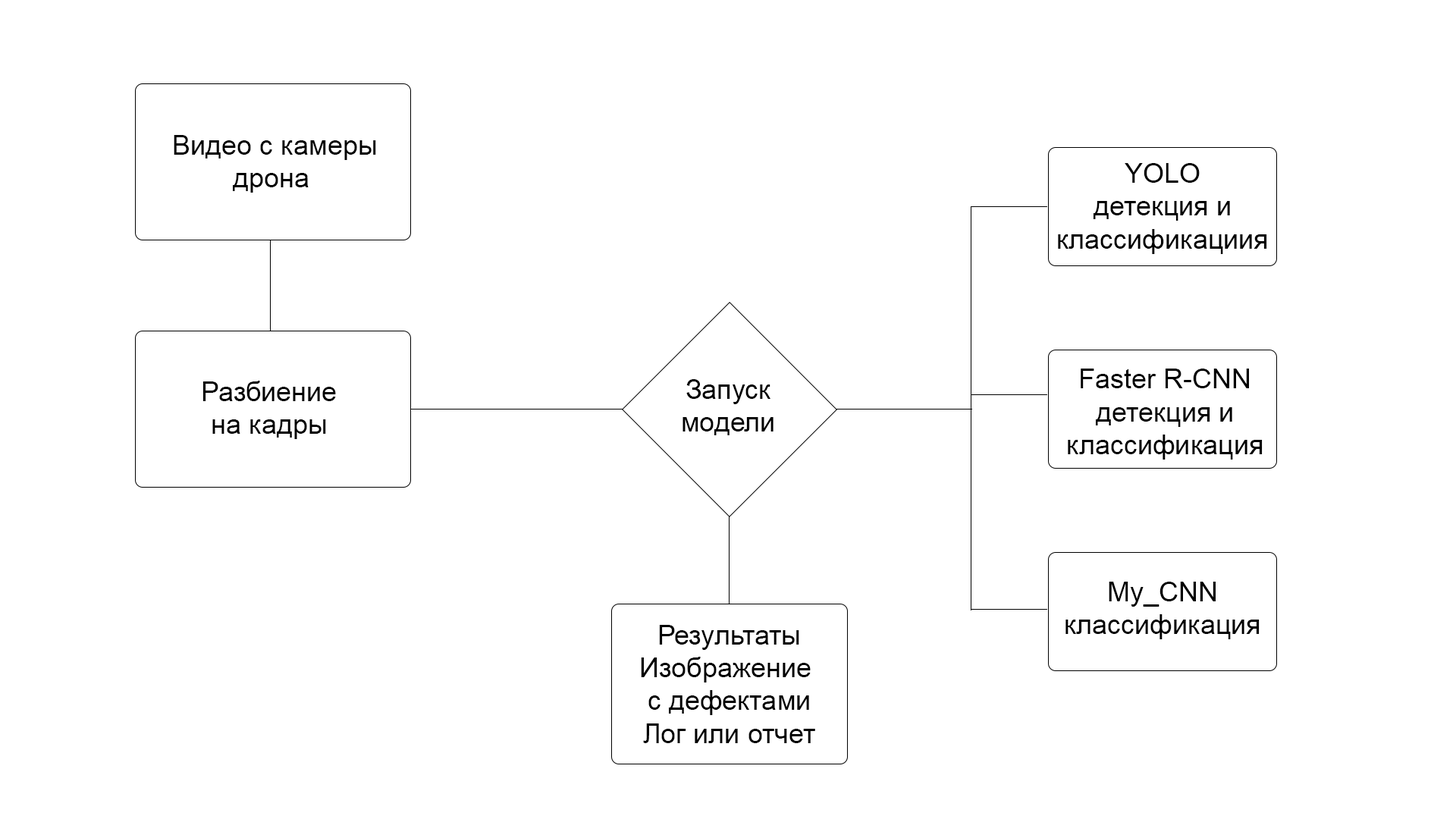
<style>
.page{position:relative;width:1456px;height:819px;background:#ffffff}
.page>*{position:absolute;margin:0}
.t1{font:27.3px "ArialMT";color:#000000}
</style>
<div class="page">
<p class="t1" style="left:174px;top:135px;width:202px;height:58px;text-align:center">Видео с камеры<br>дрона</p>
<p class="t1" style="left:1058px;top:163px;width:209px;height:91px;text-align:center">YOLO<br>детекция и<br>классификациия</p>
<p class="t1" style="left:1068px;top:369px;width:195px;height:91px;text-align:center">Faster R-CNN<br>детекция и<br>классификация</p>
<p class="t1" style="left:202px;top:381px;width:134px;height:58px;text-align:center">Разбиение<br>на кадры</p>
<p class="t1" style="left:682px;top:379px;width:91px;height:56px;text-align:center">Запуск модели</p>
<p class="t1" style="left:1065px;top:582px;width:195px;height:57px;text-align:center">My_CNN<br>классификация</p>
<p class="t1" style="left:641px;top:625px;width:174px;height:118px;text-align:center">Результаты<br>Изображение <br>с дефектами<br>Лог или отчет</p>
</div>
